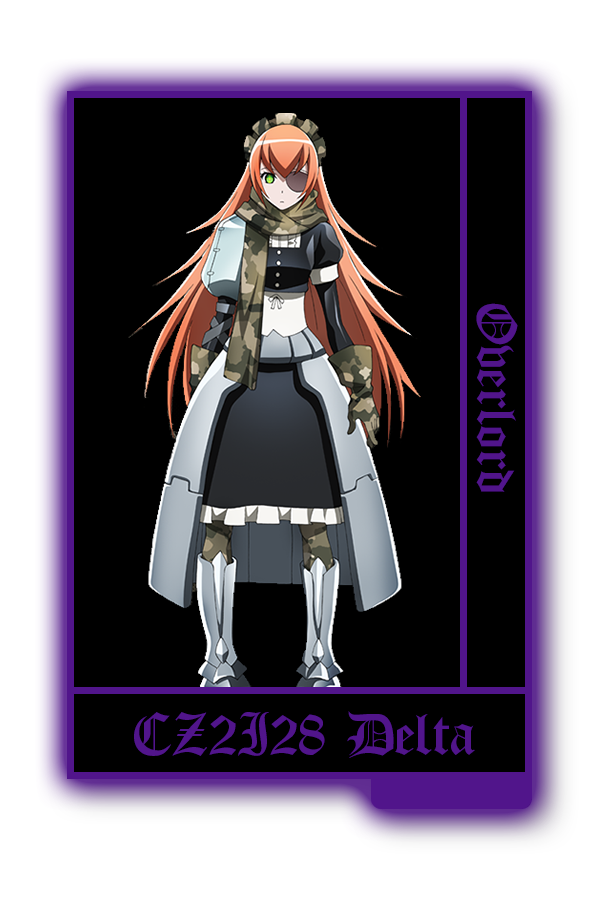
<style>
.page{position:relative;width:600px;height:900px;background:#000000}
.page>*{position:absolute;margin:0}
.t1{font:61.5px "OldLondon";color:#51158b}
.t2{font:65.2px "OldLondon";color:#51158b}
</style>
<div class="page">
<p class="t1" style="left:476px;top:303px;width:42px;height:189px;rotate:90deg">Overlord</p>
<p class="t2" style="left:134px;top:711px;width:341px;height:47px">CZ2I28 Delta</p>
</div>
